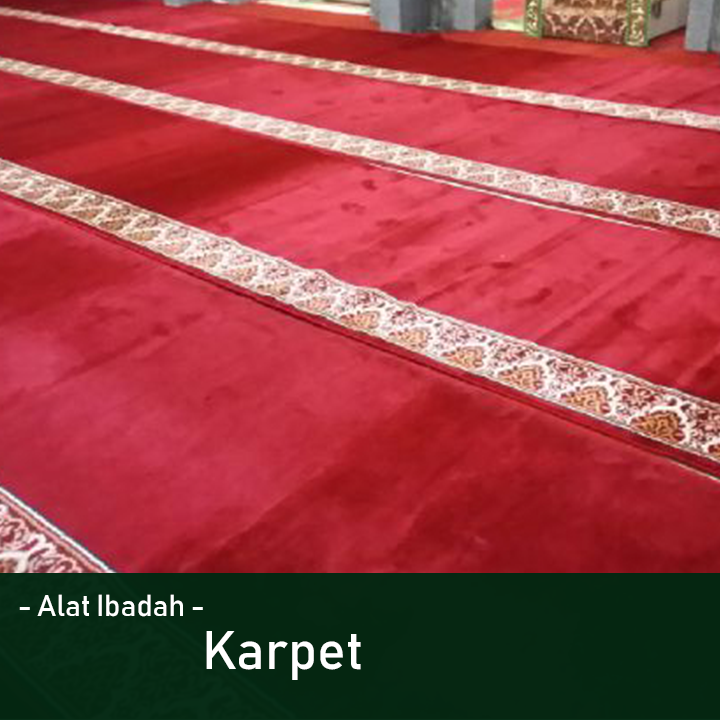
<style>
.page{position:relative;width:720px;height:720px}
.page>*{position:absolute;margin:0}
.t1{font:30px "Bahnschrift";color:#ffffff}
.t2{font:53.6px "Bahnschrift";color:#ffffff}
</style>
<div class="page">
<p class="t1" style="left:19px;top:594px;width:184px;height:23px">- Alat Ibadah -</p>
<p class="t2" style="left:206px;top:631px;width:155px;height:49px">Karpet</p>
</div>
